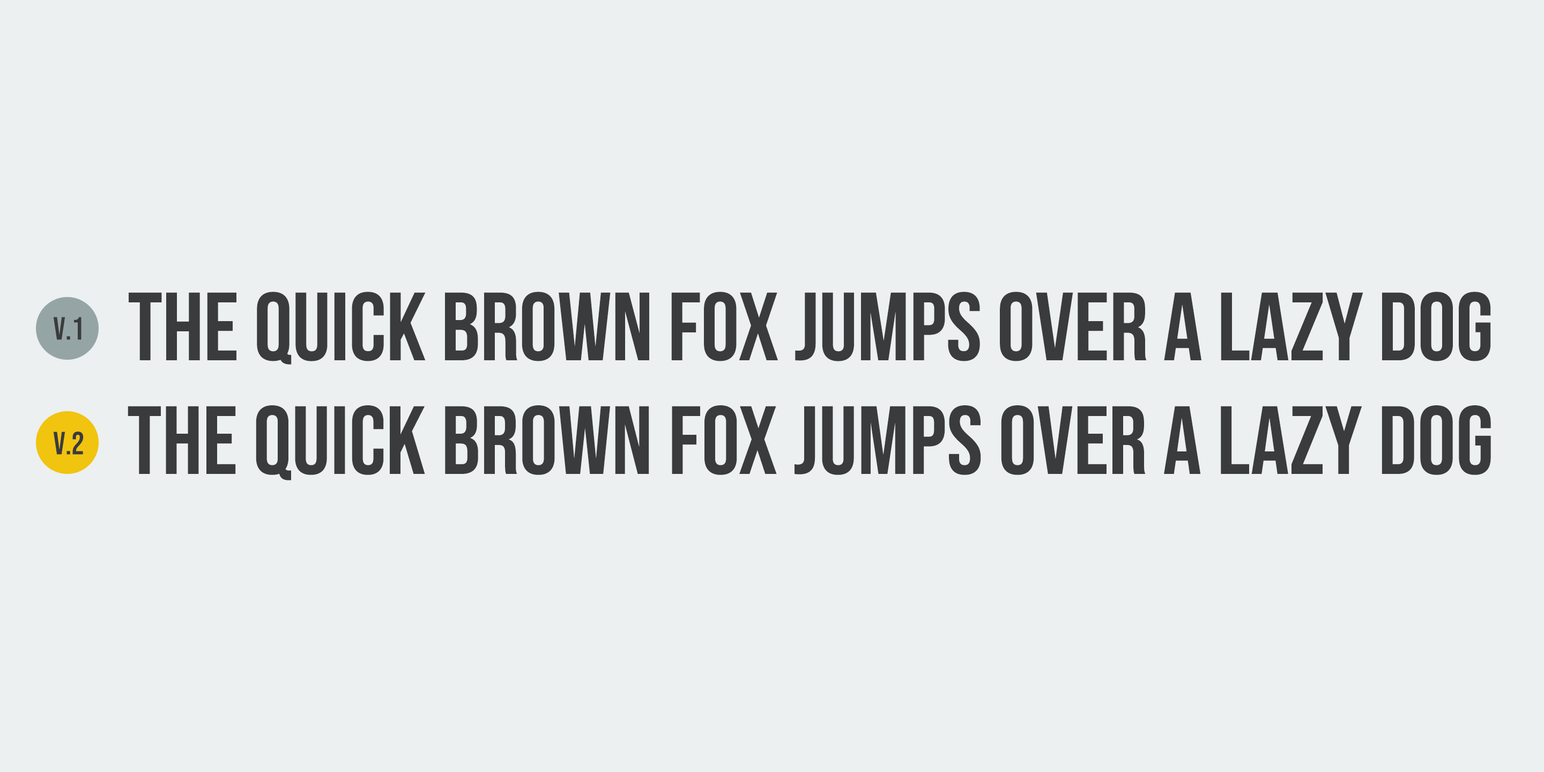
<style>
.page{position:relative;width:1544px;height:772px;background:#ecf0f1}
.page>*{position:absolute;margin:0}
.t1{font:96.5px "BebasNeueOLD-Regular";color:#3a3b3d}
.t2{font:32.2px "BebasNeue-Regular";color:#3a3b3d}
.t3{font:96.5px "BebasNeue-Regular";color:#3a3b3d}
</style>
<div class="page">
<p class="t1" style="left:129px;top:292px;width:1362px;height:73px">The quick brown fox jumps over a lazy dog</p>
<p class="t2" style="left:53px;top:317px;width:29px;height:23px">v.1</p>
<p class="t3" style="left:128px;top:405px;width:1363px;height:75px">The quick brown fox jumps over a lazy dog</p>
<p class="t2" style="left:53px;top:432px;width:31px;height:23px">v.2</p>
</div>
